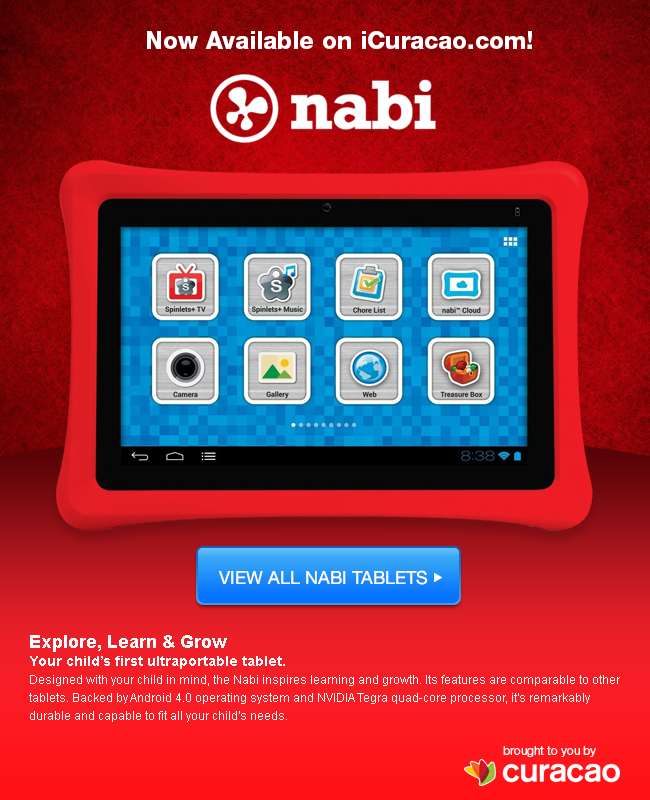
<style>
.page{position:relative;width:650px;height:800px}
.page>*{position:absolute;margin:0}
.t1{font:24px "HelveticaNeue-Heavy";color:#ffffff}
.t2{font:18px "HelveticaNeue-Roman";color:#ffffff}
.t3{font:12px/18px "ArialMT";color:#ffffff}
.t4{font:18px/18px "Arial-BoldMT";color:#ffffff}
.t5{font:14px/18px "Arial-BoldMT";color:#ffffff}
.t6{font:12px "HelveticaNeue-Light";color:#ffffff}
</style>
<div class="page">
<p class="t1" style="left:147px;top:31px;width:385px;height:18px">Now Available on iCuracao.com!</p>
<p class="t2" style="left:218px;top:570px;width:210px;height:15px">VIEW ALL NABI TABLETS</p>
<p class="t3" style="left:29px;top:635px;width:591px;height:87px"><span class="t4">Explore, Learn &amp; Grow<br></span><span class="t5">Your child’s first ultraportable tablet.<br></span>Designed with your child in mind, the Nabi inspires learning and growth. Its features are comparable to other tablets. Backed by Android 4.0 operating system and NVIDIA Tegra quad-core processor, it's remarkably durable and capable to fit all your child's needs.</p>
<p class="t6" style="left:503px;top:746px;width:93px;height:11px">brought to you by</p>
</div>
